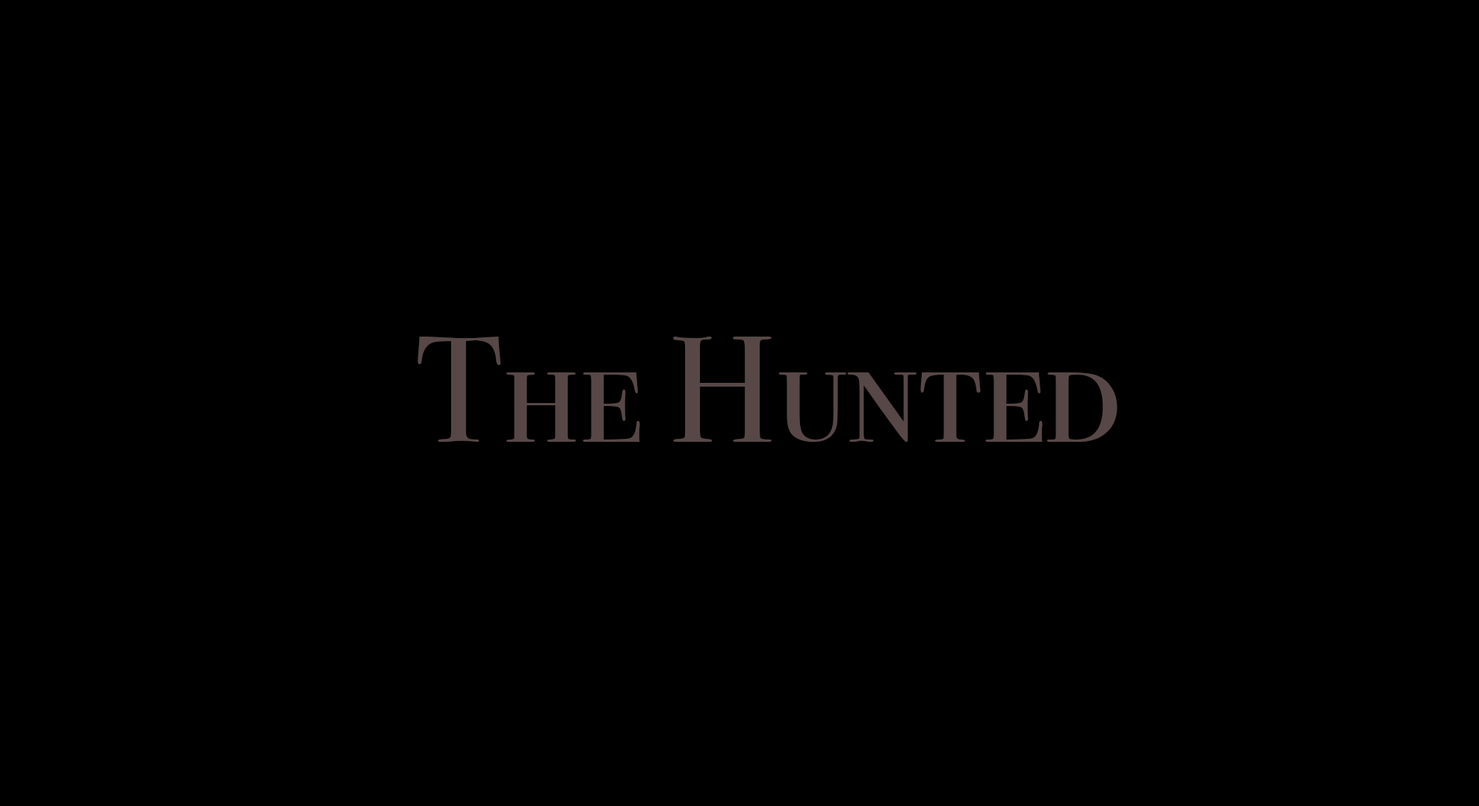
<style>
.page{position:relative;width:1479px;height:806px;background:#000000}
.page>*{position:absolute;margin:0}
.t1{font:149.3px "BodoniSvtyTwoSCITCTT-Book";color:#574847}
</style>
<div class="page">
<p class="t1" style="left:417px;top:337px;width:700px;height:105px">The Hunted</p>
</div>
